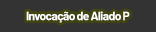
<style>
.page{position:relative;width:156px;height:32px;background:#333333}
.page>*{position:absolute;margin:0}
.t1{font:12px "Barlow-Bold";letter-spacing:-0.05em;color:#ffffff}
</style>
<div class="page">
<p class="t1" style="left:26px;top:11px;width:104px;height:12px">Invocação de Aliado P</p>
</div>
